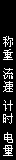
<style>
.page{position:relative;width:16px;height:160px;background:#000000}
.page>*{position:absolute;margin:0}
.t1{font:13px/13px "WenQuanYiBitmapSong13px";color:#ffffff}
</style>
<div class="page">
<p class="t1" style="left:3px;top:36px;width:10px;height:24px;text-align:center">称<br>重</p>
<p class="t1" style="left:3px;top:68px;width:10px;height:24px;text-align:center">流<br>速</p>
<p class="t1" style="left:3px;top:100px;width:10px;height:24px;text-align:center">计<br>时</p>
<p class="t1" style="left:3px;top:132px;width:10px;height:24px;text-align:center">电<br>量</p>
</div>
